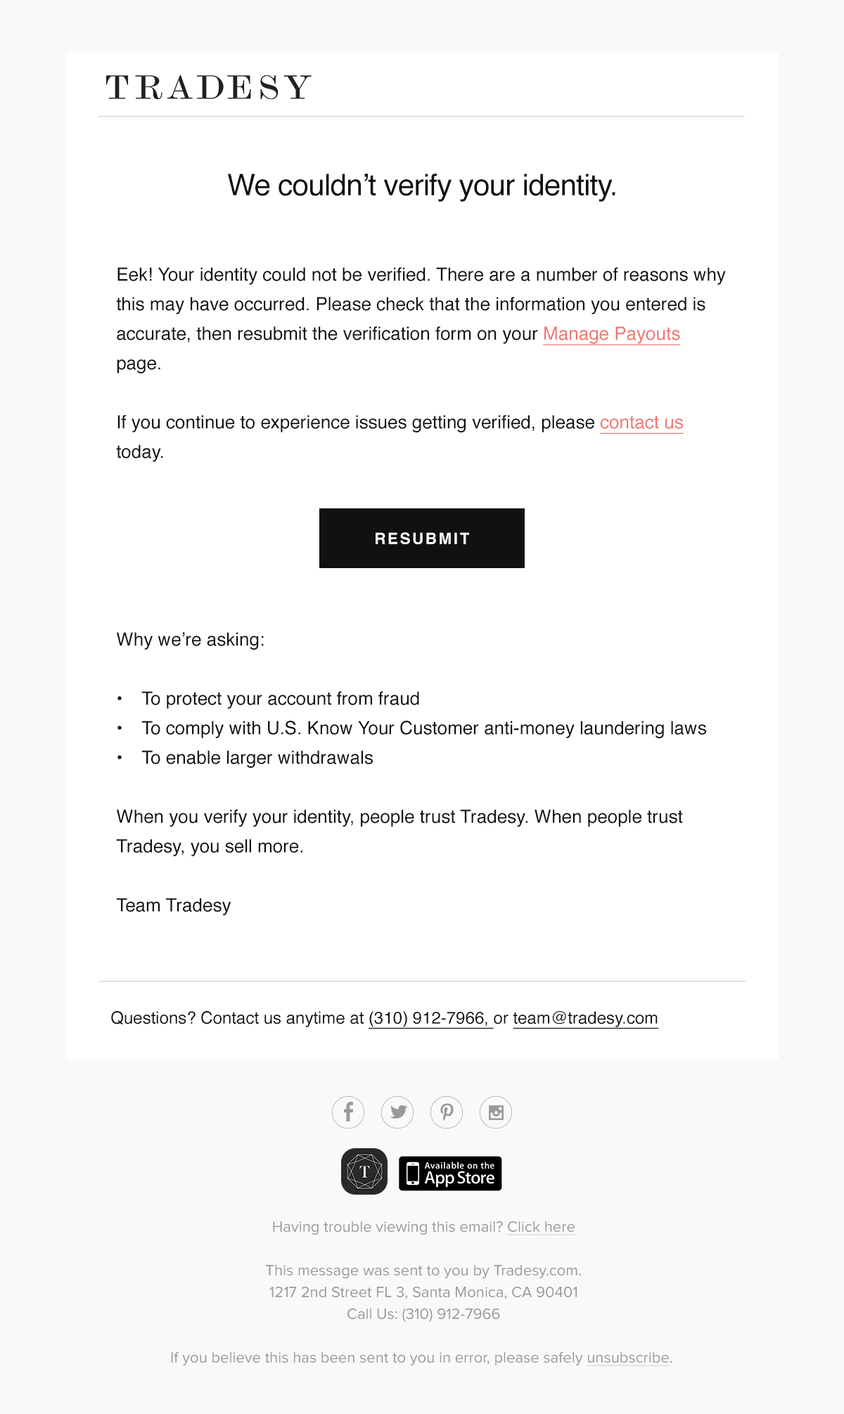
<style>
.page{position:relative;width:844px;height:1414px;background:#ffffff}
.page>*{position:absolute;margin:0}
.t1{font:29.8px "Helvetica";letter-spacing:-0.02em;color:#111111}
.t2{font:18.3px/29.5px "Helvetica";color:#111111}
.t3{font:18.3px/29.5px "Helvetica";color:#ee7873;text-decoration:underline}
.t4{font:15.7px "Helvetica-Bold";letter-spacing:0.12em;color:#ffffff}
.t5{font:16.9px "Helvetica";color:#111111}
.t6{font:16.9px "Helvetica";color:#111111;text-decoration:underline}
.t7{font:15.5px/21.8px "ProximaNova-Regular";color:#999999}
.t8{font:15.5px/21.8px "ProximaNova-Regular";color:#999999;text-decoration:underline}
</style>
<div class="page">
<p class="t1" style="left:228px;top:174px;width:387px;height:28px">We couldn’t verify your identity.</p>
<p class="t2" style="left:116px;top:267px;width:609px;height:195px">Eek! Your identity could not be verified. There are a number of reasons why this may have occurred. Please check that the information you entered is accurate, then resubmit the verification form on your <span class="t3">Manage Payouts</span> page. <br><br>If you continue to experience issues getting verified, please <span class="t3">contact us</span> today.</p>
<p class="t4" style="left:375px;top:532px;width:94px;height:12px">RESUBMIT</p>
<p class="t2" style="left:116px;top:632px;width:590px;height:283px">Why we’re asking:<br><br>• To protect your account from fraud<br>• To comply with U.S. Know Your Customer anti-money laundering laws<br>• To enable larger withdrawals<br><br>When you verify your identity, people trust Tradesy. When people trust Tradesy, you sell more. <br><br>Team Tradesy</p>
<p class="t5" style="left:111px;top:1011px;width:548px;height:17px">Questions? Contact us anytime at <span class="t6">(310) 912-7966, </span>or <span class="t6">team@tradesy.com</span></p>
<p class="t7" style="left:171px;top:1220px;width:501px;height:146px;text-align:center">Having trouble viewing this email? <span class="t8">Click here<br></span><br>This message was sent to you by Tradesy.com.<br>1217 2nd Street FL 3, Santa Monica, CA 90401<br>Call Us: (310) 912-7966<br><br>If you believe this has been sent to you in error, please safely <span class="t8">unsubscribe</span>.</p>
</div>
